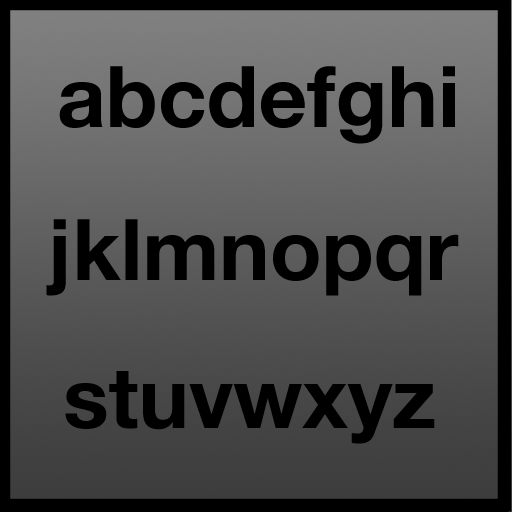
<style>
.page{position:relative;width:512px;height:512px;background:#000000}
.page>*{position:absolute;margin:0}
.t1{font:85px "HelveticaNeue-Bold";color:#000000}
</style>
<div class="page">
<p class="t1" style="left:59px;top:66px;width:396px;height:78px">abcdefghi</p>
<p class="t1" style="left:46px;top:219px;width:413px;height:77px">jklmnopqr</p>
<p class="t1" style="left:65px;top:371px;width:370px;height:73px">stuvwxyz</p>
</div>
